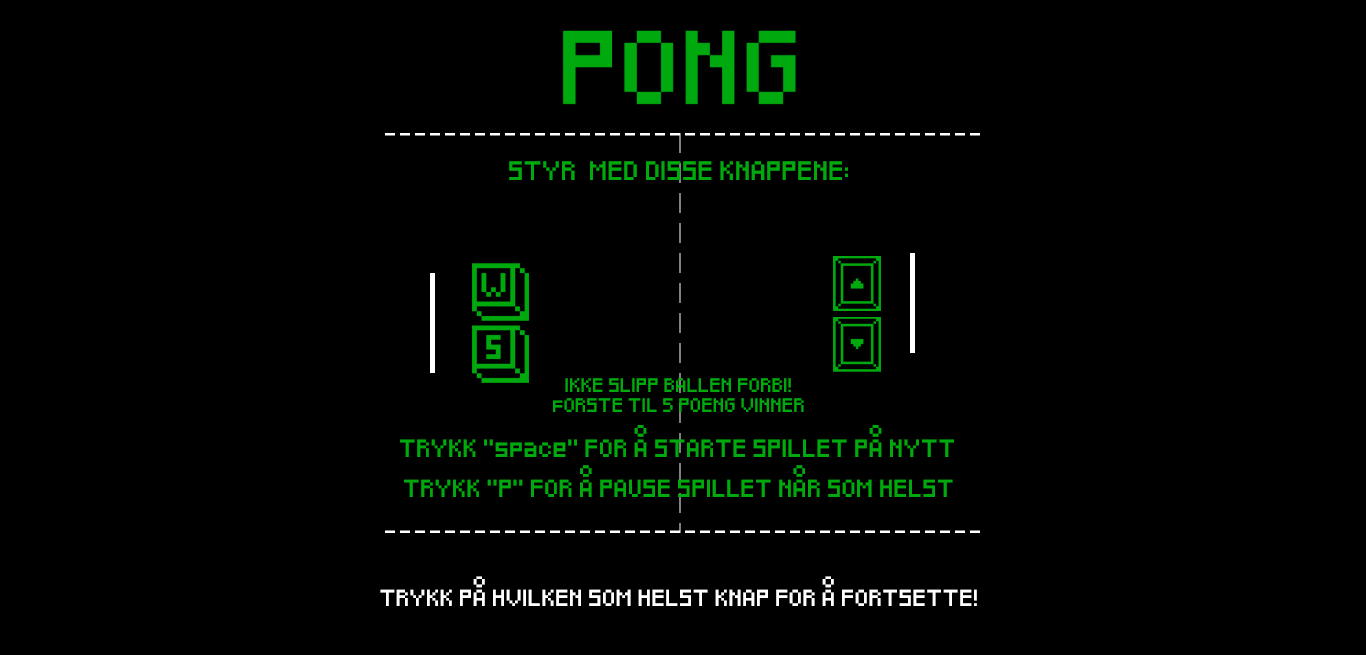
<style>
.page{position:relative;width:1366px;height:655px;background:#000000}
.page>*{position:absolute;margin:0}
.t1{font:15.5px "Pixeled";color:#00aa0e}
.t2{font:11.5px/20.4px "Pixeled";color:#00aa0e}
.t3{font:14.5px "Pixeled";color:#00aa0e}
.t4{font:14.4px "Pixeled";color:#00aa0e}
.t5{font:13.5px "Pixeled";color:#ffffff}
</style>
<div class="page">
<p class="t1" style="left:509px;top:161px;width:339px;height:19px">STYR  MED DISSE KNAPPENE:</p>
<p class="t2" style="left:553px;top:378px;width:251px;height:34px;text-align:center">IKKE SLIPP BALLEN FORBI!<br>fORSTE TIL 5 POENG VINNER</p>
<p class="t3" style="left:400px;top:425px;width:554px;height:32px">TRYKK "space" FOR Å STARTE SPILLET PÅ NYTT</p>
<p class="t4" style="left:404px;top:465px;width:549px;height:32px">TRYKK "P" FOR Å PAUSE SPILLET NÅR SOM HELST</p>
<p class="t5" style="left:380px;top:576px;width:597px;height:30px">TRYKK PÅ HVILKEN SOM HELST KNAP FOR Å FORTSETTE!</p>
</div>
